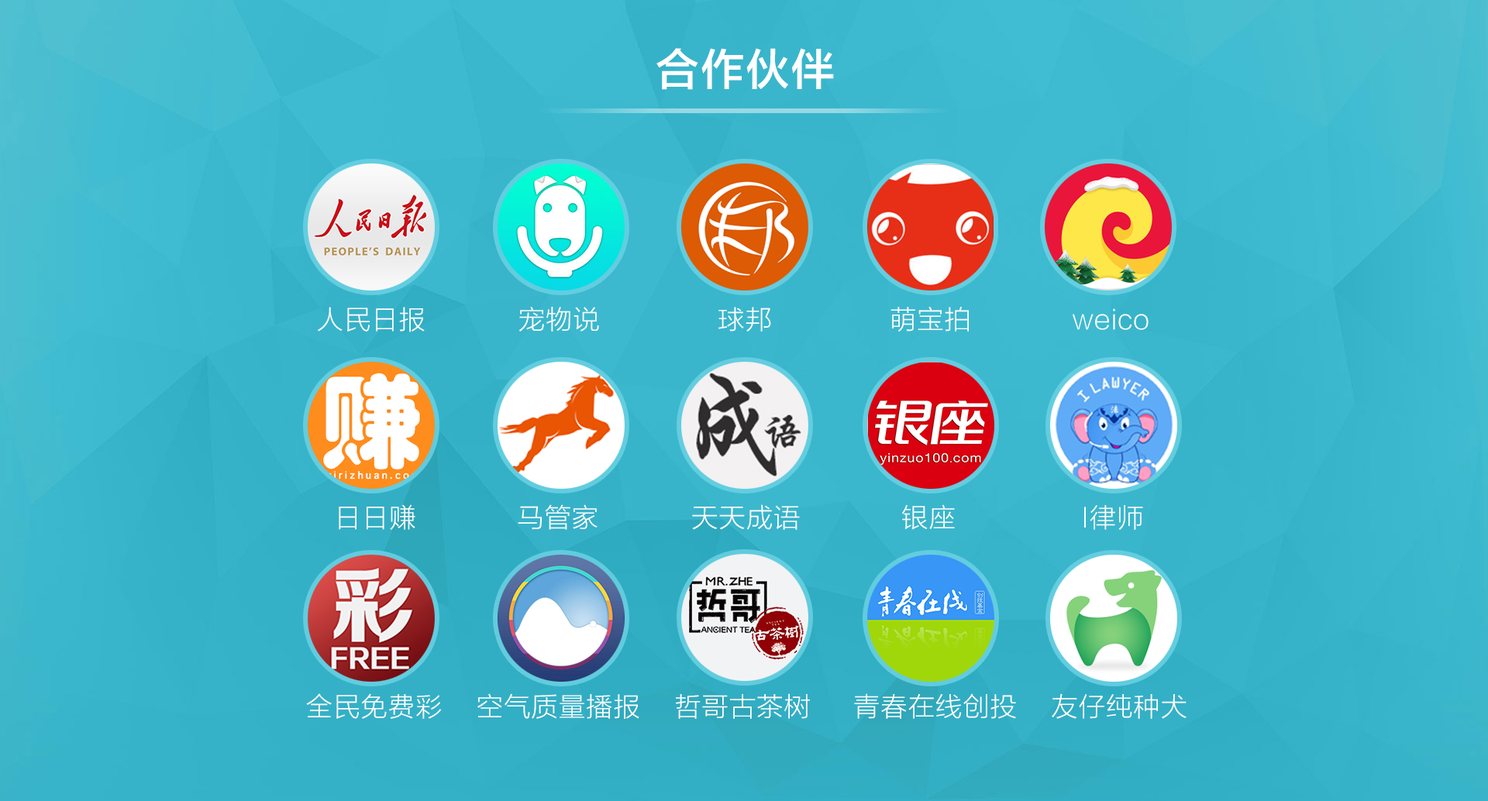
<style>
.page{position:relative;width:1488px;height:801px}
.page>*{position:absolute;margin:0}
.t1{font:43.4px "FZLTZHK--GBK1-0";letter-spacing:0.04em;color:#ffffff}
.t2{font:26.4px "FZLTXHK--GBK1-0";letter-spacing:0.04em;color:#ffffff}
</style>
<div class="page">
<p class="t1" style="left:656px;top:48px;width:178px;height:42px">合作伙伴</p>
<p class="t2" style="left:318px;top:307px;width:831px;height:25px">人民日报           宠物说              球邦              萌宝拍            weico</p>
<p class="t2" style="left:339px;top:505px;width:804px;height:25px">日日赚            马管家           天天成语            银座               I律师</p>
<p class="t2" style="left:306px;top:694px;width:881px;height:25px">全民免费彩    空气质量播报    哲哥古茶树     青春在线创投    友仔纯种犬</p>
</div>
